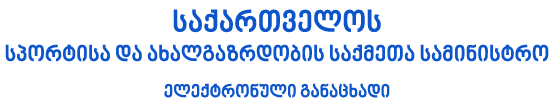
<style>
.page{position:relative;width:560px;height:110px;background:#ffffff}
.page>*{position:absolute;margin:0}
.t1{font:22px "BPGNinoMtavruli-Bold";color:#0d55cb}
.t2{font:30px "BPGNinoMtavruli-Bold";color:#0d55cb}
.t3{font:18px "BPGNinoMtavruli-Bold";color:#0d55cb}
</style>
<div class="page">
<p class="t1" style="left:5px;top:9px;width:544px;height:89px;text-align:center"><span class="t2">საქართველოს<br></span>სპორტისა და ახალგაზრდობის საქმეთა სამინისტრო <br><br><span class="t3">ელექტრონული განაცხადი</span></p>
</div>
